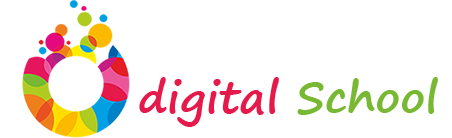
<style>
.page{position:relative;width:452px;height:138px;background:#ffffff}
.page>*{position:absolute;margin:0}
.t1{font:43.4px "SegoePrint-Bold";color:#e51a4b}
.t2{font:43.4px "SegoePrint-Bold";color:#78b833}
</style>
<div class="page">
<p class="t1" style="left:139px;top:77px;width:299px;height:50px">digital <span class="t2">School</span></p>
</div>
